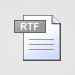
<style>
.page{position:relative;width:75px;height:75px}
.page>*{position:absolute;margin:0}
.t1{font:10px "Arial-BoldMT";color:#f2f8ff}
</style>
<div class="page">
<p class="t1" style="left:20px;top:22px;width:19px;height:8px">RTF</p>
</div>
